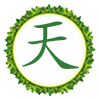
<style>
.page{position:relative;width:100px;height:100px;background:#ffffff}
.page>*{position:absolute;margin:0}
.t1{font:65.3px "STKaiti";color:#307c34}
</style>
<div class="page">
<p class="t1" style="left:22px;top:21px;width:58px;height:48px">天</p>
</div>
